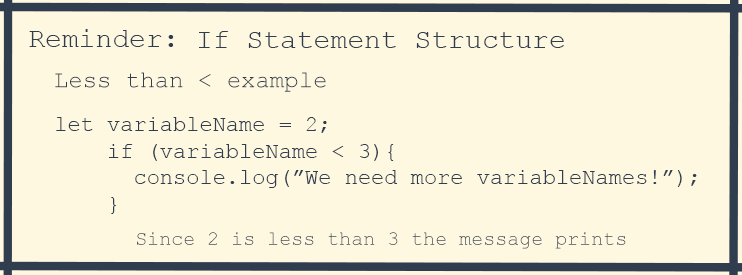
<style>
.page{position:relative;width:742px;height:275px;background:#fff8e1}
.page>*{position:absolute;margin:0}
.t1{font:28px "CourierNewPSMT";color:#303d4e}
.t2{font:24px "CourierNewPSMT";color:#303d4e}
.t3{font:22px "CourierNewPSMT";color:#303d4e}
.t4{font:24px "CourierNewPS-BoldItalicMT";color:#303d4e}
.t5{font:20px "CourierNewPSMT";color:#303d4e}
</style>
<div class="page">
<p class="t1" style="left:29px;top:29px;width:145px;height:18px">Reminder:</p>
<p class="t1" style="left:199px;top:31px;width:365px;height:17px">If Statement Structure</p>
<p class="t2" style="left:55px;top:72px;width:271px;height:20px">Less than &lt; example</p>
<p class="t3" style="left:56px;top:117px;width:641px;height:97px"><span class="t4">  <br><br> </span>let variableName = 2;<br>     if (variableName &lt; 3){<br>       console.log(”We need more variableNames!”);<br>     }</p>
<p class="t5" style="left:137px;top:232px;width:489px;height:17px">Since 2 is less than 3 the message prints</p>
</div>
